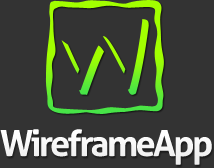
<style>
.page{position:relative;width:214px;height:168px;background:#333333}
.page>*{position:absolute;margin:0}
.t1{font:36px "Aller-Bold";letter-spacing:-0.075em;color:#ffffff}
</style>
<div class="page">
<p class="t1" style="left:0px;top:129px;width:212px;height:36px">WireframeApp</p>
</div>
